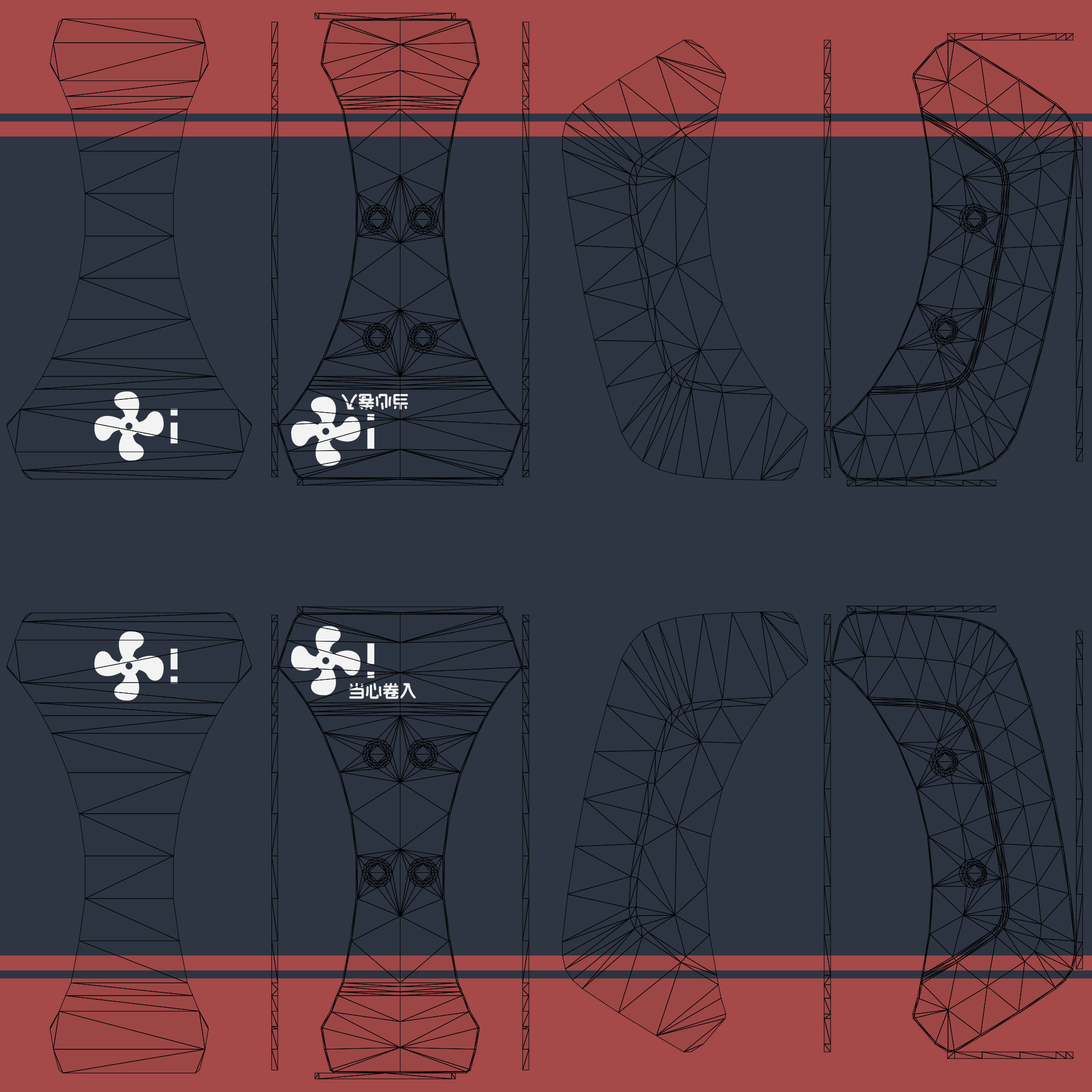
<style>
.page{position:relative;width:1092px;height:1092px;background:#2e3644}
.page>*{position:absolute;margin:0}
.t1{font:17.1px "AlimamaFangYuanTiVF-Bold";color:#ffffff}
</style>
<div class="page">
<p class="t1" style="left:341px;top:393px;width:67px;height:17px;rotate:180deg">当心卷入</p>
<p class="t1" style="left:349px;top:683px;width:67px;height:16px">当心卷入</p>
</div>
